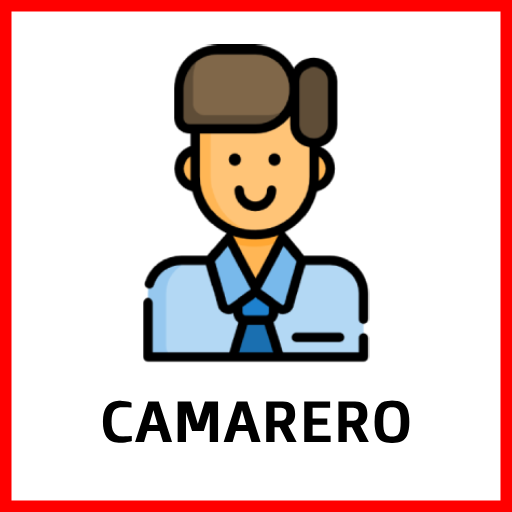
<style>
.page{position:relative;width:512px;height:512px;background:#ffffff}
.page>*{position:absolute;margin:0}
.t1{font:58.1px "DoppioOne-Regular";color:#000000;font-weight:bold}
</style>
<div class="page">
<p class="t1" style="left:102px;top:400px;width:308px;height:43px">CAMARERO</p>
</div>
